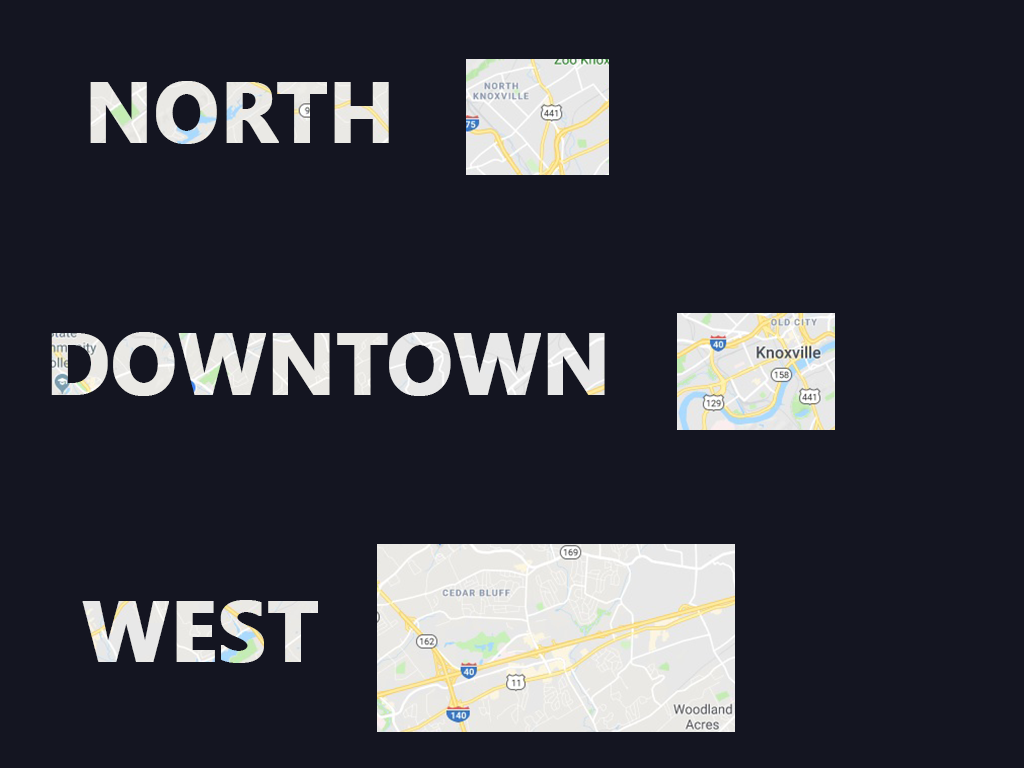
<style>
.page{position:relative;width:1024px;height:768px;background:#141521}
.page>*{position:absolute;margin:0}
.t1{font:85px "SegoeUI-Bold";color:#eae9e5;font-weight:bold}
.t2{font:87.4px "SegoeUI-Bold";color:#e9e9e7;font-weight:bold}
.t3{font:85px "SegoeUI-Bold";color:#e9e9e7;font-weight:bold}
</style>
<div class="page">
<p class="t1" style="left:90px;top:81px;width:299px;height:63px">NORTH</p>
<p class="t2" style="left:51px;top:332px;width:554px;height:64px">DOWNTOWN</p>
<p class="t3" style="left:82px;top:600px;width:236px;height:63px">WEST</p>
</div>
